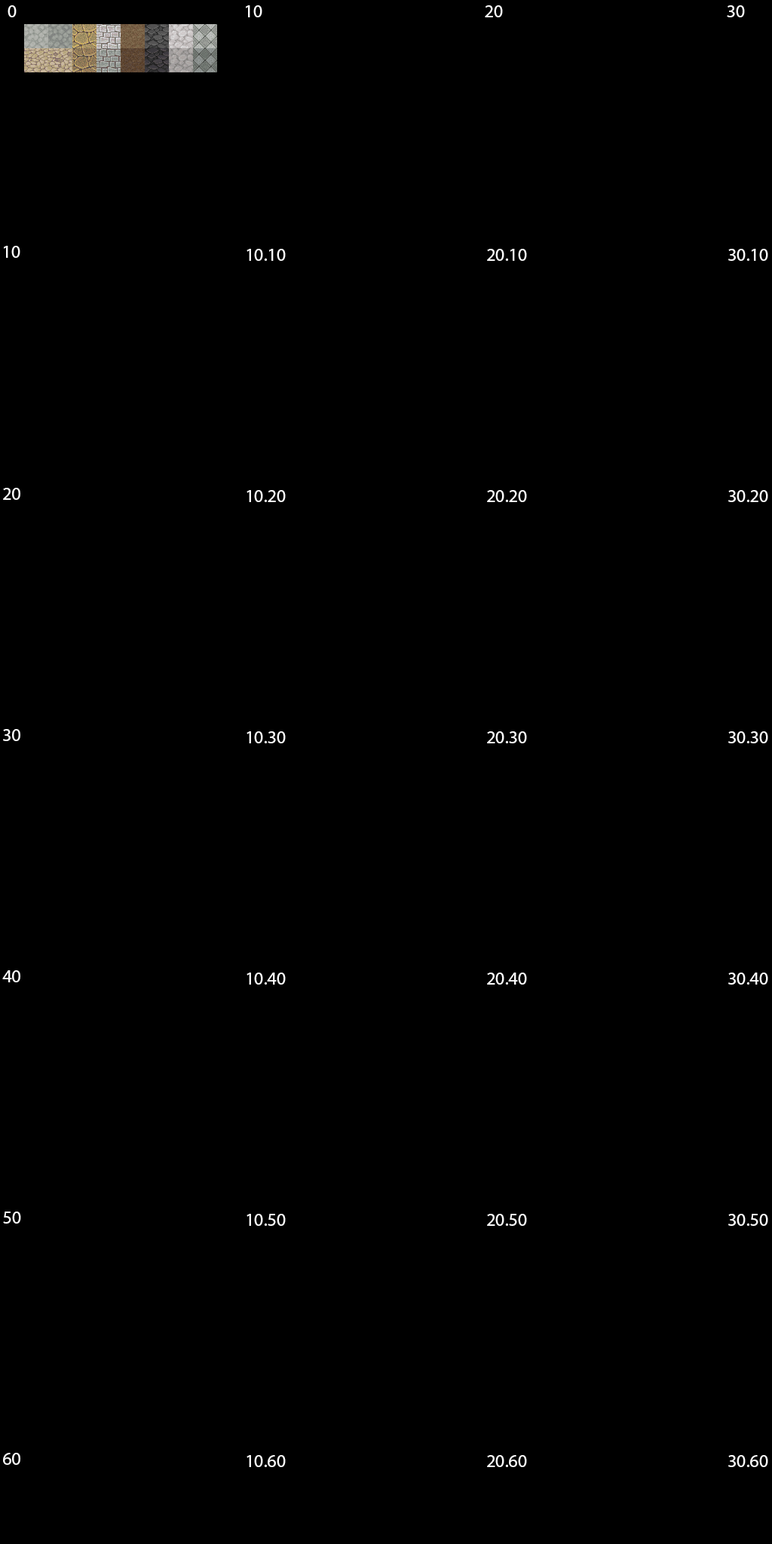
<style>
.page{position:relative;width:772px;height:1544px;background:#000000}
.page>*{position:absolute;margin:0}
.t1{font:18.1px "MyriadPro-Regular";color:#fefefe}
</style>
<div class="page">
<p class="t1" style="left:8px;top:5px;width:9px;height:12px">0</p>
<p class="t1" style="left:246px;top:5px;width:16px;height:12px">10</p>
<p class="t1" style="left:485px;top:5px;width:18px;height:12px">20</p>
<p class="t1" style="left:727px;top:5px;width:18px;height:12px">30</p>
<p class="t1" style="left:4px;top:246px;width:16px;height:12px">10</p>
<p class="t1" style="left:247px;top:249px;width:39px;height:12px">10.10</p>
<p class="t1" style="left:487px;top:249px;width:40px;height:12px">20.10</p>
<p class="t1" style="left:728px;top:249px;width:40px;height:12px">30.10</p>
<p class="t1" style="left:3px;top:488px;width:17px;height:12px">20</p>
<p class="t1" style="left:247px;top:490px;width:39px;height:12px">10.20</p>
<p class="t1" style="left:487px;top:490px;width:40px;height:12px">20.20</p>
<p class="t1" style="left:728px;top:490px;width:40px;height:12px">30.20</p>
<p class="t1" style="left:3px;top:729px;width:17px;height:12px">30</p>
<p class="t1" style="left:247px;top:731px;width:39px;height:12px">10.30</p>
<p class="t1" style="left:487px;top:731px;width:40px;height:12px">20.30</p>
<p class="t1" style="left:728px;top:731px;width:40px;height:12px">30.30</p>
<p class="t1" style="left:2px;top:970px;width:18px;height:13px">40</p>
<p class="t1" style="left:247px;top:973px;width:39px;height:12px">10.40</p>
<p class="t1" style="left:487px;top:973px;width:40px;height:12px">20.40</p>
<p class="t1" style="left:728px;top:973px;width:40px;height:12px">30.40</p>
<p class="t1" style="left:3px;top:1212px;width:18px;height:12px">50</p>
<p class="t1" style="left:247px;top:1214px;width:39px;height:12px">10.50</p>
<p class="t1" style="left:487px;top:1214px;width:40px;height:12px">20.50</p>
<p class="t1" style="left:728px;top:1214px;width:40px;height:12px">30.50</p>
<p class="t1" style="left:3px;top:1453px;width:17px;height:12px">60</p>
<p class="t1" style="left:247px;top:1455px;width:39px;height:12px">10.60</p>
<p class="t1" style="left:487px;top:1455px;width:40px;height:12px">20.60</p>
<p class="t1" style="left:728px;top:1455px;width:40px;height:12px">30.60</p>
</div>
